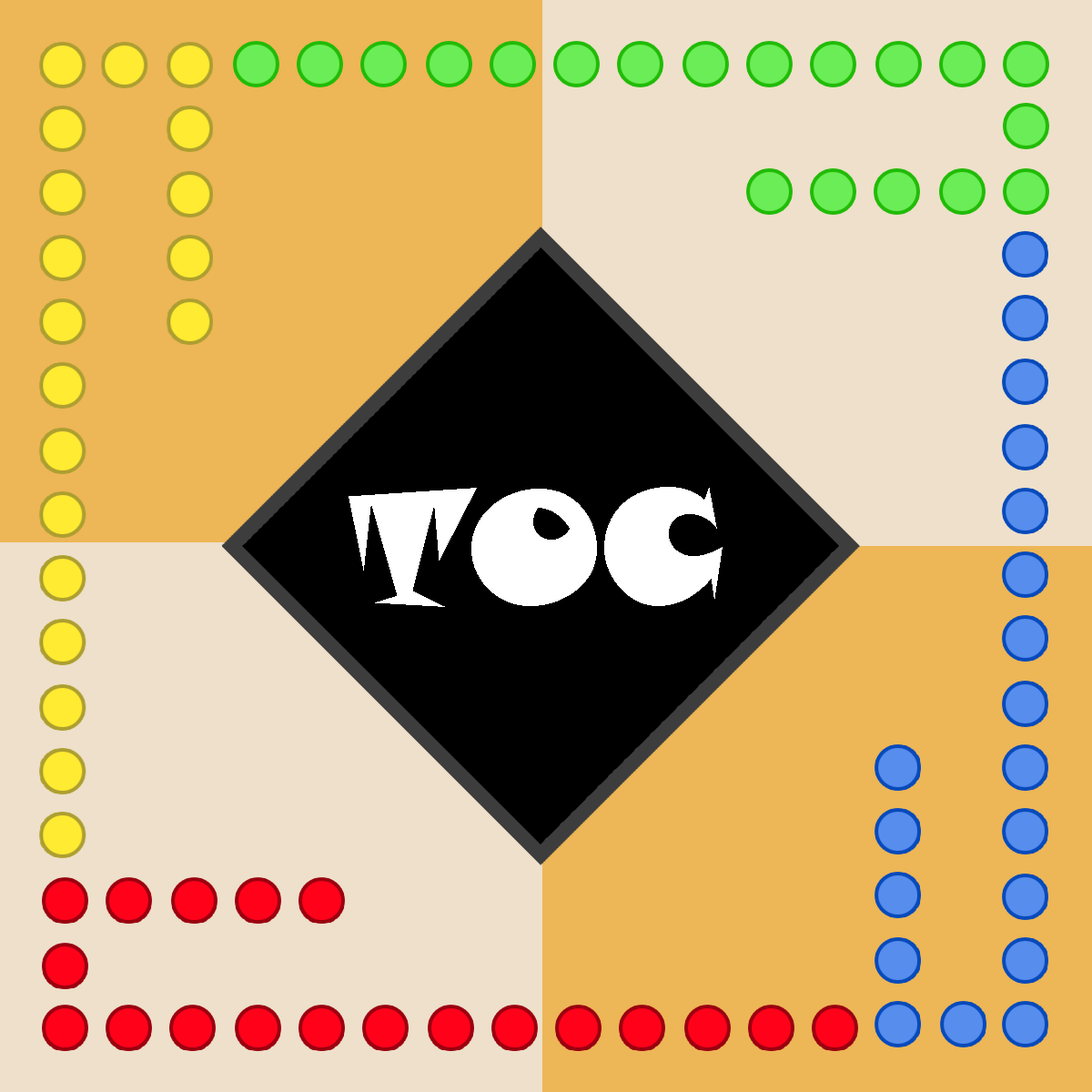
<style>
.page{position:relative;width:1092px;height:1092px;background:#edb656}
.page>*{position:absolute;margin:0}
.t1{font:158.9px "SnapITC-Regular";color:#ffffff}
</style>
<div class="page">
<p class="t1" style="left:349px;top:487px;width:374px;height:120px">TOC</p>
</div>
